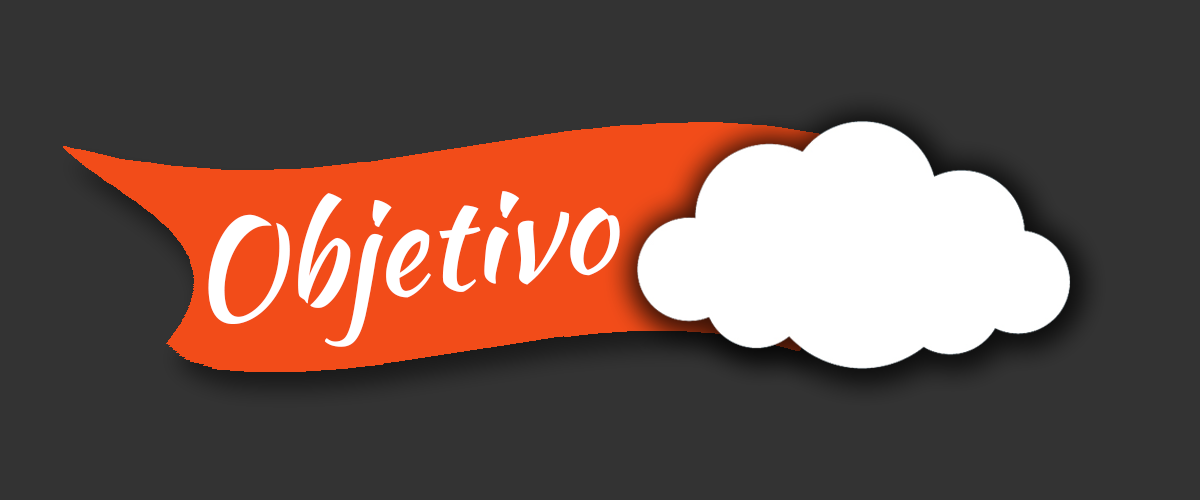
<style>
.page{position:relative;width:1200px;height:500px;background:#333333}
.page>*{position:absolute;margin:0}
.t1{font:129.5px "KaushanScript-Regular";color:#ffffff}
</style>
<div class="page">
<p class="t1" style="left:208px;top:191px;width:412px;height:156px;rotate:-7deg">Objetivo</p>
</div>
